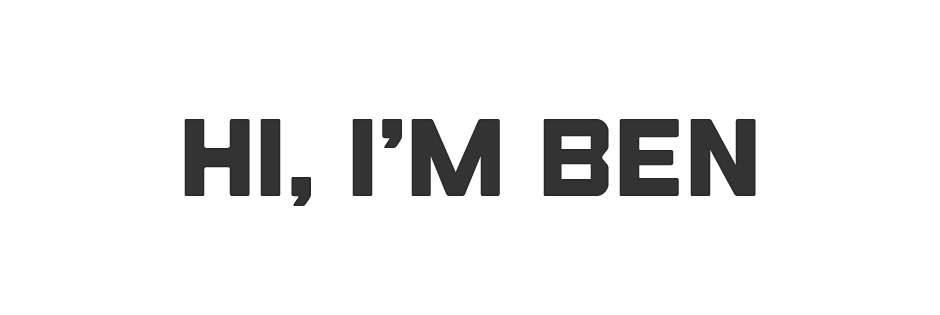
<style>
.page{position:relative;width:940px;height:315px;background:#ffffff}
.page>*{position:absolute;margin:0}
.t1{font:110px "Outage-Regular";letter-spacing:-0.05em;color:#333333}
</style>
<div class="page">
<p class="t1" style="left:184px;top:119px;width:572px;height:87px">Hi, I’m Ben</p>
</div>
